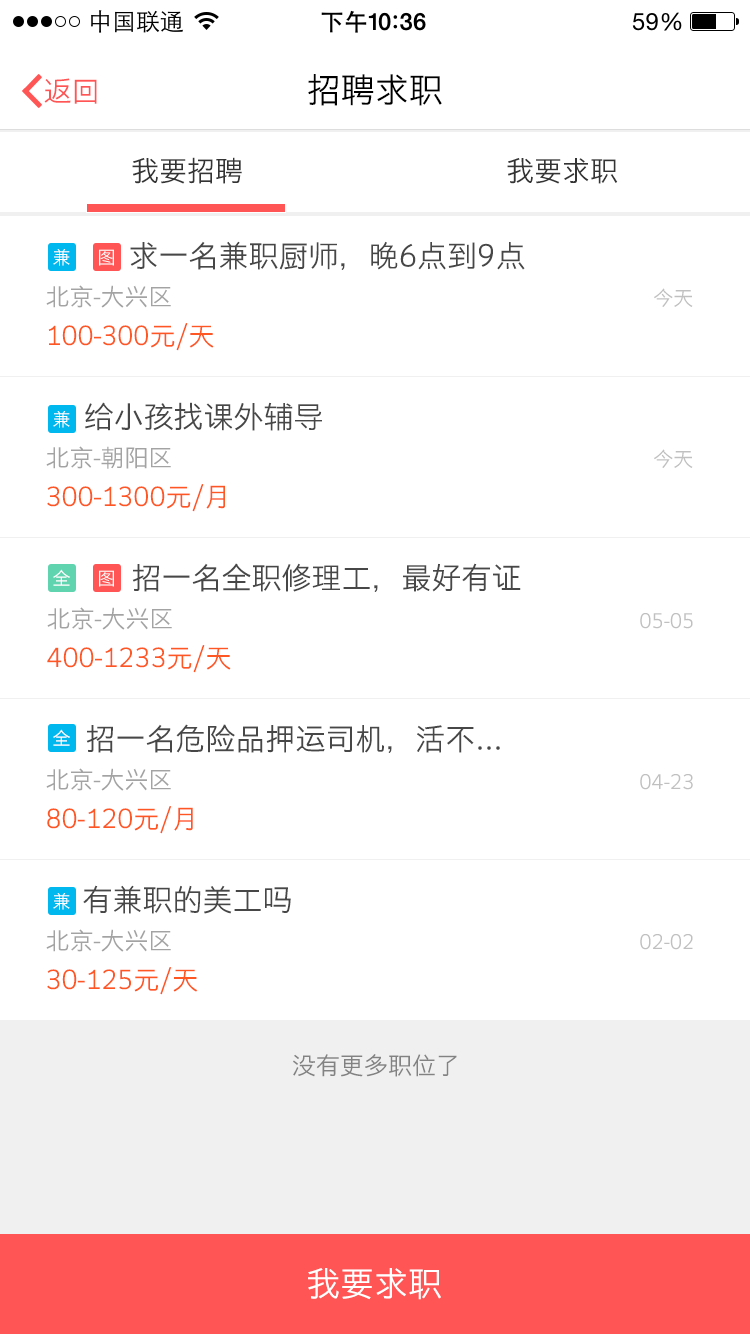
<style>
.page{position:relative;width:750px;height:1334px;background:#ffffff}
.page>*{position:absolute;margin:0}
.t1{font:28px "STHeitiSC-Light";color:#ff5555}
.t2{font:34px "STHeitiSC-Light";color:#000000}
.t3{font:28px "STHeitiSC-Light";color:#343434}
.t4{font:30px "STHeitiSC-Light";color:#484747}
.t5{font:18px "STHeitiSC-Light";color:#ffffff}
.t6{font:24px "STHeitiSC-Light";color:#a3a3a3}
.t7{font:20px "STHeitiSC-Light";color:#c1c0c0}
.t8{font:26px "STHeitiSC-Light";color:#ff5723}
.t9{font:24px "STHeitiSC-Light";color:#828282}
.t10{font:34px "STHeitiSC-Light";color:#ffffff}
</style>
<div class="page">
<p class="t1" style="left:44px;top:78px;width:53px;height:26px">返回</p>
<p class="t2" style="left:308px;top:74px;width:134px;height:32px">招聘求职</p>
<p class="t3" style="left:132px;top:157px;width:110px;height:27px">我要招聘</p>
<p class="t3" style="left:507px;top:158px;width:111px;height:26px">我要求职</p>
<p class="t4" style="left:130px;top:241px;width:395px;height:29px">求一名兼职厨师，晚6点到9点</p>
<p class="t5" style="left:53px;top:249px;width:17px;height:17px">兼</p>
<p class="t5" style="left:99px;top:249px;width:15px;height:17px">图</p>
<p class="t6" style="left:46px;top:285px;width:125px;height:23px">北京-大兴区</p>
<p class="t7" style="left:654px;top:288px;width:39px;height:19px">今天</p>
<p class="t8" style="left:48px;top:323px;width:166px;height:28px">100-300元/天</p>
<p class="t5" style="left:53px;top:411px;width:17px;height:17px">兼</p>
<p class="t4" style="left:85px;top:402px;width:237px;height:29px">给小孩找课外辅导</p>
<p class="t6" style="left:46px;top:446px;width:125px;height:23px">北京-朝阳区</p>
<p class="t7" style="left:654px;top:449px;width:39px;height:19px">今天</p>
<p class="t8" style="left:47px;top:484px;width:178px;height:28px">300-1300元/月</p>
<p class="t5" style="left:53px;top:569px;width:17px;height:17px">全</p>
<p class="t4" style="left:132px;top:563px;width:389px;height:29px">招一名全职修理工，最好有证</p>
<p class="t5" style="left:99px;top:570px;width:15px;height:17px">图</p>
<p class="t6" style="left:47px;top:607px;width:125px;height:23px">北京-大兴区</p>
<p class="t7" style="left:640px;top:613px;width:53px;height:16px">05-05</p>
<p class="t8" style="left:47px;top:645px;width:184px;height:28px">400-1233元/天</p>
<p class="t4" style="left:86px;top:724px;width:414px;height:29px">招一名危险品押运司机，活不...</p>
<p class="t5" style="left:53px;top:729px;width:17px;height:17px">全</p>
<p class="t6" style="left:46px;top:768px;width:125px;height:23px">北京-大兴区</p>
<p class="t7" style="left:640px;top:774px;width:53px;height:16px">04-23</p>
<p class="t8" style="left:47px;top:806px;width:146px;height:28px">80-120元/月</p>
<p class="t5" style="left:53px;top:893px;width:17px;height:17px">兼</p>
<p class="t4" style="left:83px;top:885px;width:208px;height:29px">有兼职的美工吗</p>
<p class="t6" style="left:46px;top:929px;width:125px;height:23px">北京-大兴区</p>
<p class="t7" style="left:640px;top:934px;width:53px;height:16px">02-02</p>
<p class="t8" style="left:47px;top:967px;width:151px;height:28px">30-125元/天</p>
<p class="t9" style="left:293px;top:1054px;width:164px;height:23px">没有更多职位了</p>
<p class="t10" style="left:308px;top:1268px;width:133px;height:32px">我要求职</p>
</div>
